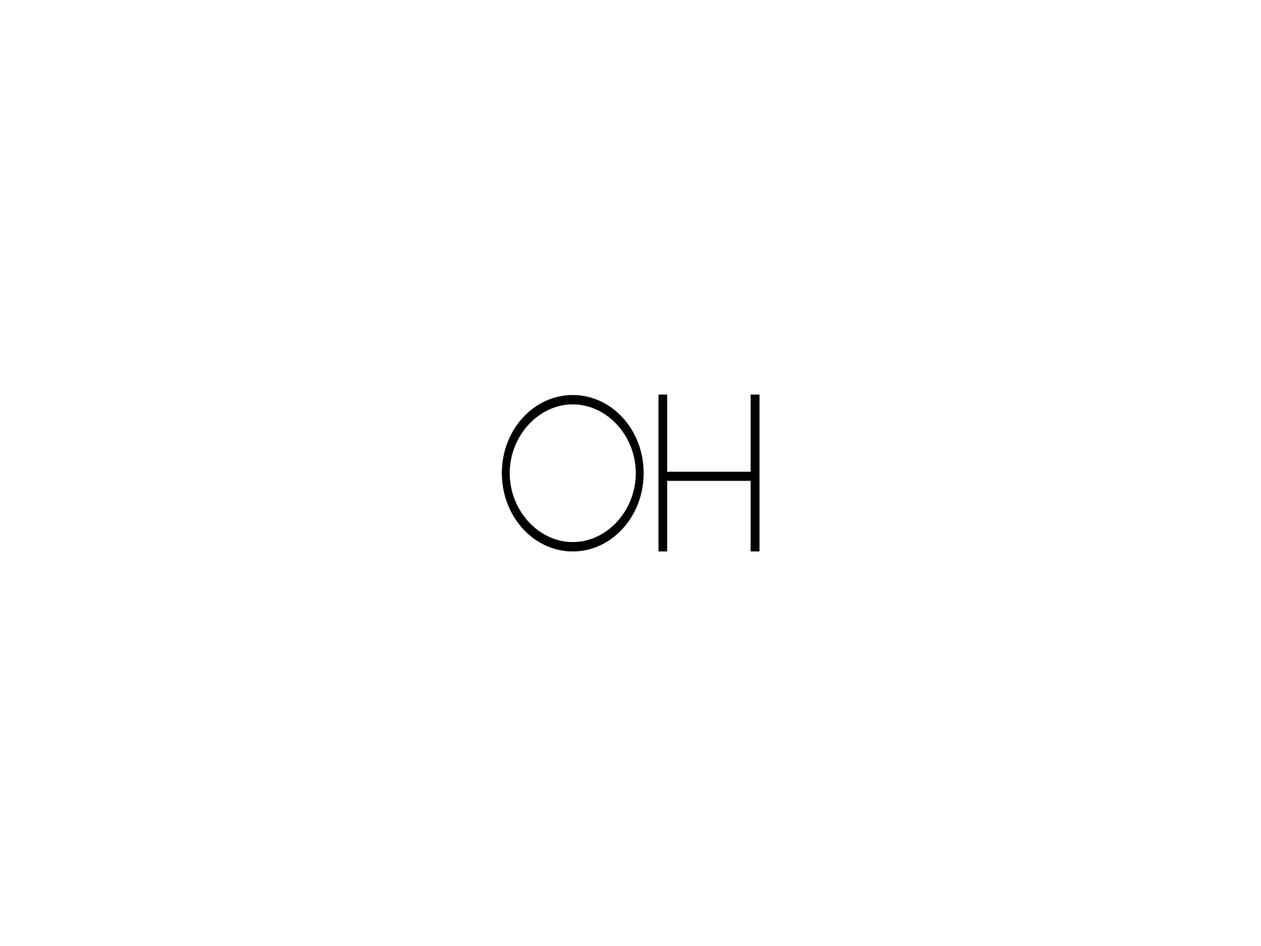
<style>
.page{position:relative;width:1261px;height:946px;background:#ffffff}
.page>*{position:absolute;margin:0}
.t1{font:222.4px "Alcubierre";color:#000000;scale:0.95 1}
</style>
<div class="page">
<p class="t1" style="left:502px;top:394px;width:258px;height:157px">OH</p>
</div>
